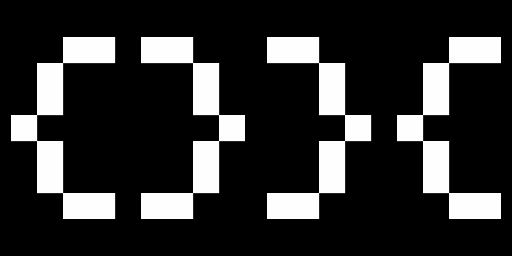
<style>
.page{position:relative;width:512px;height:256px;background:#000000}
.page>*{position:absolute;margin:0}
.t1{font:208.3px "Minecraftia-Regular";color:#fefefe}
</style>
<div class="page">
<p class="t1" style="left:11px;top:37px;width:234px;height:182px">{}</p>
<p class="t1" style="left:267px;top:37px;width:234px;height:182px">}{</p>
</div>
